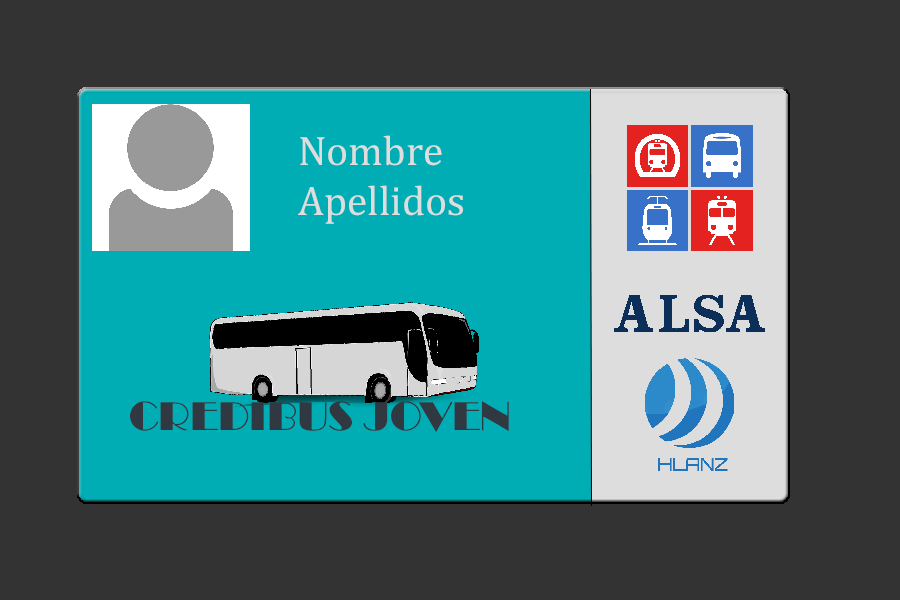
<style>
.page{position:relative;width:900px;height:600px;background:#333333}
.page>*{position:absolute;margin:0}
.t1{font:41.7px "Cambria";color:#dddddd}
.t2{font:41.7px "Broadway";color:#303841}
</style>
<div class="page">
<p class="t1" style="left:298px;top:135px;width:165px;height:89px">Nombre<br>Apellidos</p>
<p class="t2" style="left:130px;top:401px;width:379px;height:32px">CREDIBUS JOVEN</p>
</div>
